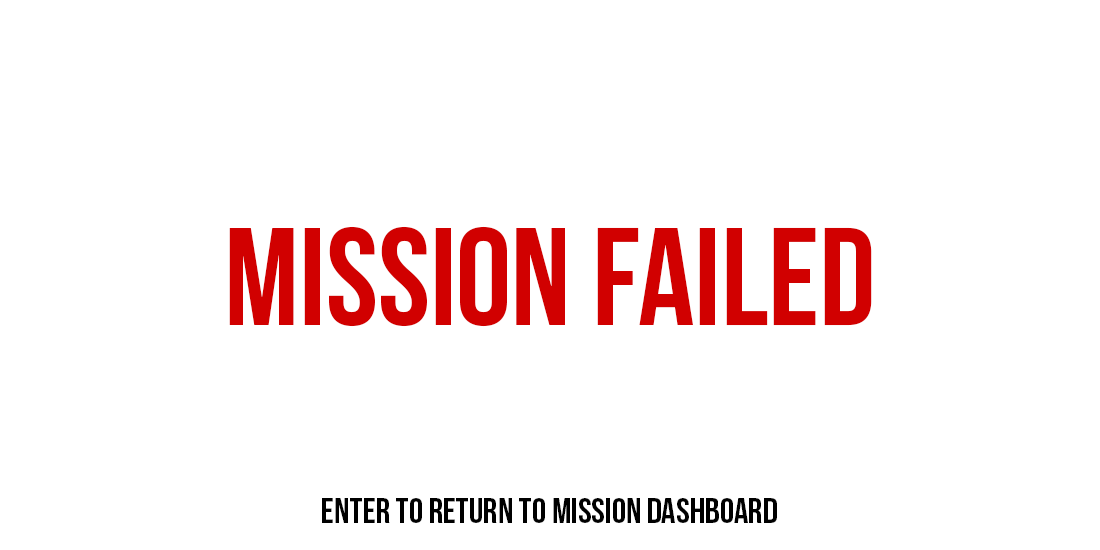
<style>
.page{position:relative;width:1100px;height:550px;background:#ffffff}
.page>*{position:absolute;margin:0}
.t1{font:138.9px "BebasNeue";color:#d10000}
.t2{font:36px "BebasNeue";color:#000000}
</style>
<div class="page">
<p class="t1" style="left:229px;top:226px;width:643px;height:101px">MISSION FAILED</p>
<p class="t2" style="left:322px;top:498px;width:455px;height:25px">ENTER TO RETURN TO MISSION DASHBOARD</p>
</div>
